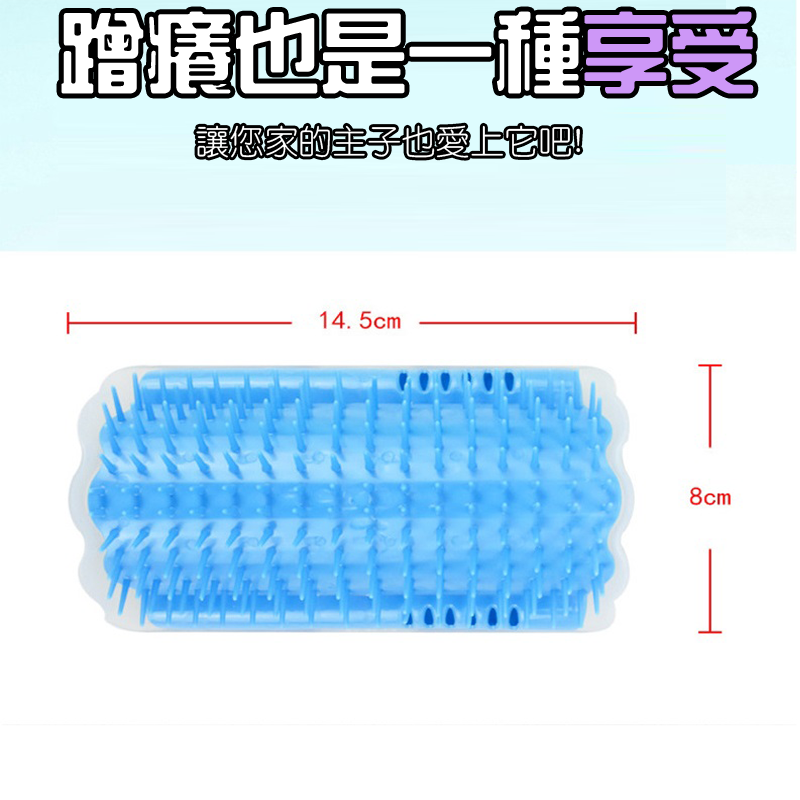
<style>
.page{position:relative;width:800px;height:800px;background:#ffffff}
.page>*{position:absolute;margin:0}
.t1{font:87px "HanWangZonYi";color:#ffffff}
.t2{font:87px "HanWangZonYi";color:#cd97f7}
.t3{font:34.3px "HanWangYenLight";color:#ffffff}
</style>
<div class="page">
<p class="t1" style="left:61px;top:11px;width:693px;height:83px">蹭癢也是一種<span class="t2">享受</span></p>
<p class="t3" style="left:196px;top:125px;width:385px;height:33px">讓您家的主子也愛上它吧!</p>
</div>
